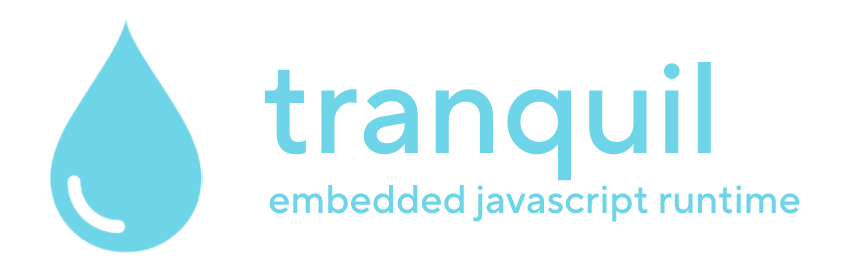
<style>
.page{position:relative;width:849px;height:274px;background:#ffffff}
.page>*{position:absolute;margin:0}
.t1{font:130px "TTNormsPro-Medium";color:#6ed4e7}
.t2{font:40px "TTNormsPro-Medium";color:#6ed4e7}
</style>
<div class="page">
<p class="t1" style="left:264px;top:62px;width:447px;height:119px">tranquil</p>
<p class="t2" style="left:269px;top:185px;width:531px;height:37px">embedded javascript runtime</p>
</div>
